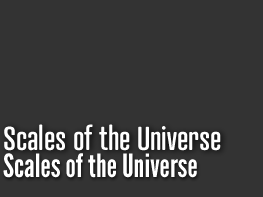
<style>
.page{position:relative;width:263px;height:197px;background:#333333}
.page>*{position:absolute;margin:0}
.t1{font:32px "LeagueGothic";color:#ffffff}
</style>
<div class="page">
<p class="t1" style="left:3px;top:153px;width:194px;height:25px">Scales of the Universe</p>
</div>
